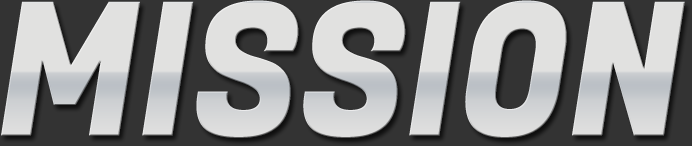
<style>
.page{position:relative;width:692px;height:146px;background:#333333}
.page>*{position:absolute;margin:0}
.t1{font:185.2px "FugazOne-Regular";color:#dfdfdf;scale:0.89 1}
</style>
<div class="page">
<p class="t1" style="left:1px;top:0px;width:684px;height:138px">MISSION</p>
</div>
